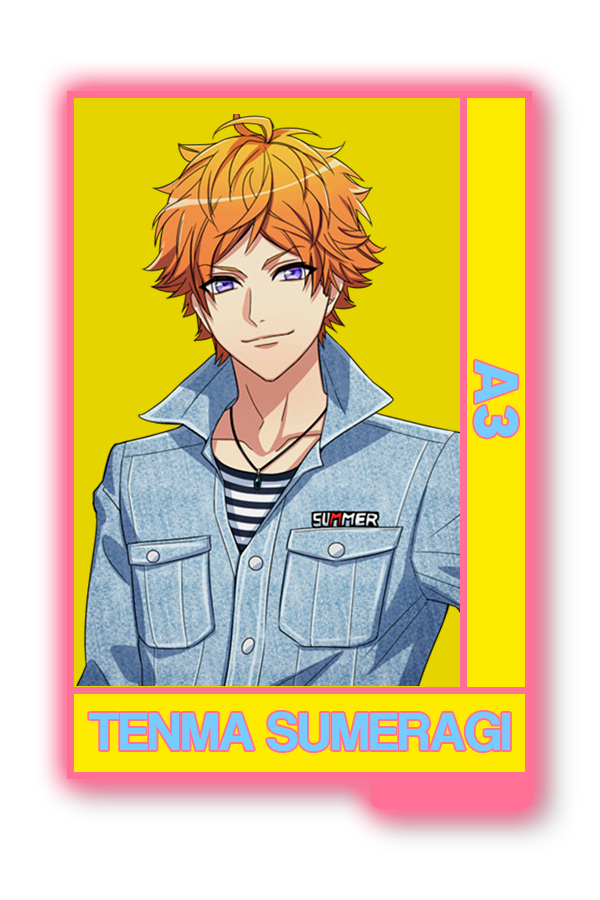
<style>
.page{position:relative;width:600px;height:900px;background:#ffffff}
.page>*{position:absolute;margin:0}
.t1{font:60.5px "MADETOMMY-Bold";color:#74ccff}
.t2{font:54.9px "CoolveticaRg-Regular";color:#74ccff}
</style>
<div class="page">
<p class="t1" style="left:474px;top:360px;width:44px;height:78px;rotate:90deg">A3</p>
<p class="t2" style="left:89px;top:712px;width:421px;height:39px">TENMA SUMERAGI</p>
</div>
